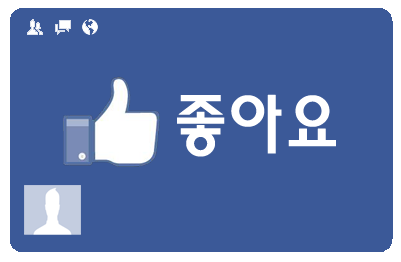
<style>
.page{position:relative;width:401px;height:262px;background:#3b5998}
.page>*{position:absolute;margin:0}
.t1{font:66px "MoeumTR-HM";color:#ffffff;font-weight:bold}
</style>
<div class="page">
<p class="t1" style="left:177px;top:94px;width:159px;height:63px">좋아요</p>
</div>
